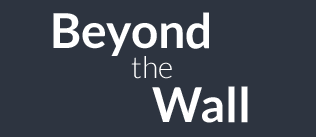
<style>
.page{position:relative;width:316px;height:137px;background:#2d3440}
.page>*{position:absolute;margin:0}
.t1{font:48px "Lato-Bold";color:#ffffff}
.t2{font:30px "Lato-Light";color:#ffffff}
</style>
<div class="page">
<p class="t1" style="left:53px;top:12px;width:156px;height:44px">Beyond</p>
<p class="t2" style="left:131px;top:56px;width:41px;height:23px">the</p>
<p class="t1" style="left:152px;top:86px;width:96px;height:37px">Wall</p>
</div>
